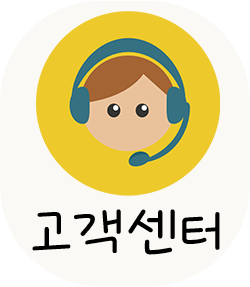
<style>
.page{position:relative;width:250px;height:287px;background:#fbf9f5}
.page>*{position:absolute;margin:0}
.t1{font:76.4px "GangwonEduSaeeumMedium";color:#000000}
</style>
<div class="page">
<p class="t1" style="left:32px;top:209px;width:188px;height:46px">고객센터</p>
</div>
